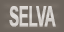
<style>
.page{position:relative;width:64px;height:32px}
.page>*{position:absolute;margin:0}
.t1{font:27.3px "Arial-BoldMT";letter-spacing:-0.03em;color:#dedbd8;font-weight:bold;scale:0.53 1}
</style>
<div class="page">
<p class="t1" style="left:9px;top:6px;width:47px;height:21px">SELVA</p>
</div>
